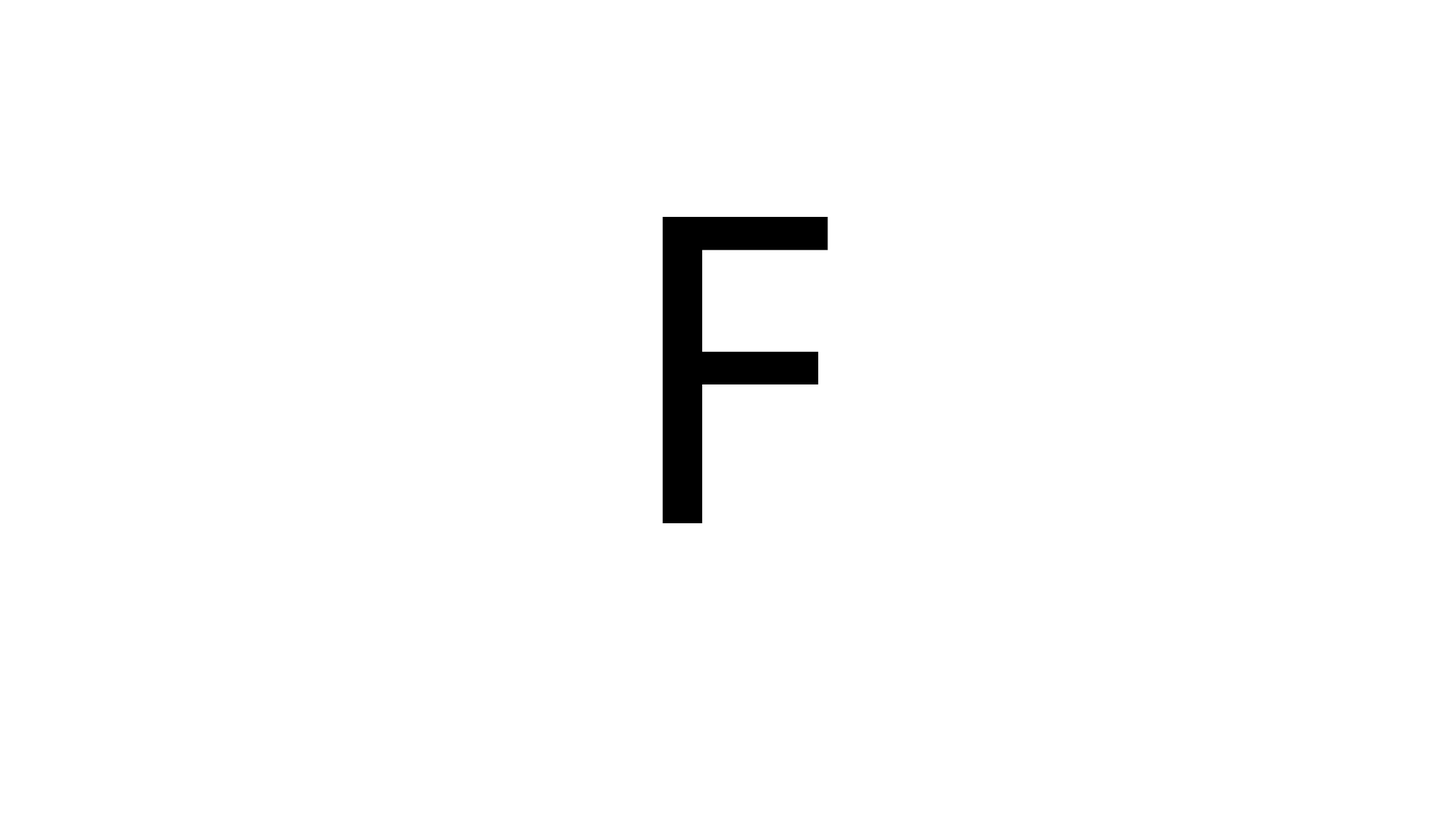
<style>
.page{position:relative;width:1456px;height:819px;background:#ffffff}
.page>*{position:absolute;margin:0}
.t1{font:455px "MyriadPro-Regular";color:#000000}
</style>
<div class="page">
<p class="t1" style="left:662px;top:217px;width:166px;height:306px">F</p>
</div>
